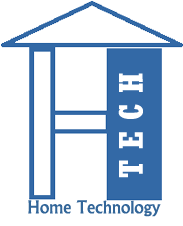
<style>
.page{position:relative;width:183px;height:226px;background:#ffffff}
.page>*{position:absolute;margin:0}
.t1{font:33.3px "Rockwell-CondensedBold";color:#ffffff}
.t2{font:18.7px "Narkisim";color:#336699}
</style>
<div class="page">
<p class="t1" style="left:118px;top:73px;width:25px;height:105px;rotate:-90deg">T E C H</p>
<p class="t2" style="left:28px;top:200px;width:133px;height:17px">Home Technology</p>
</div>
